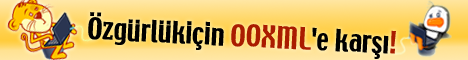
<style>
.page{position:relative;width:468px;height:60px}
.page>*{position:absolute;margin:0}
.t1{font:27px "TechnoRegular";color:#000000}
.t2{font:27px "TechnoRegular";color:#aa1c00}
</style>
<div class="page">
<p class="t1" style="left:88px;top:12px;width:308px;height:47px;rotate:3deg">Özgürlükİçin <span class="t2">OOXML</span>'e karşı<span class="t2">!</span></p>
</div>
